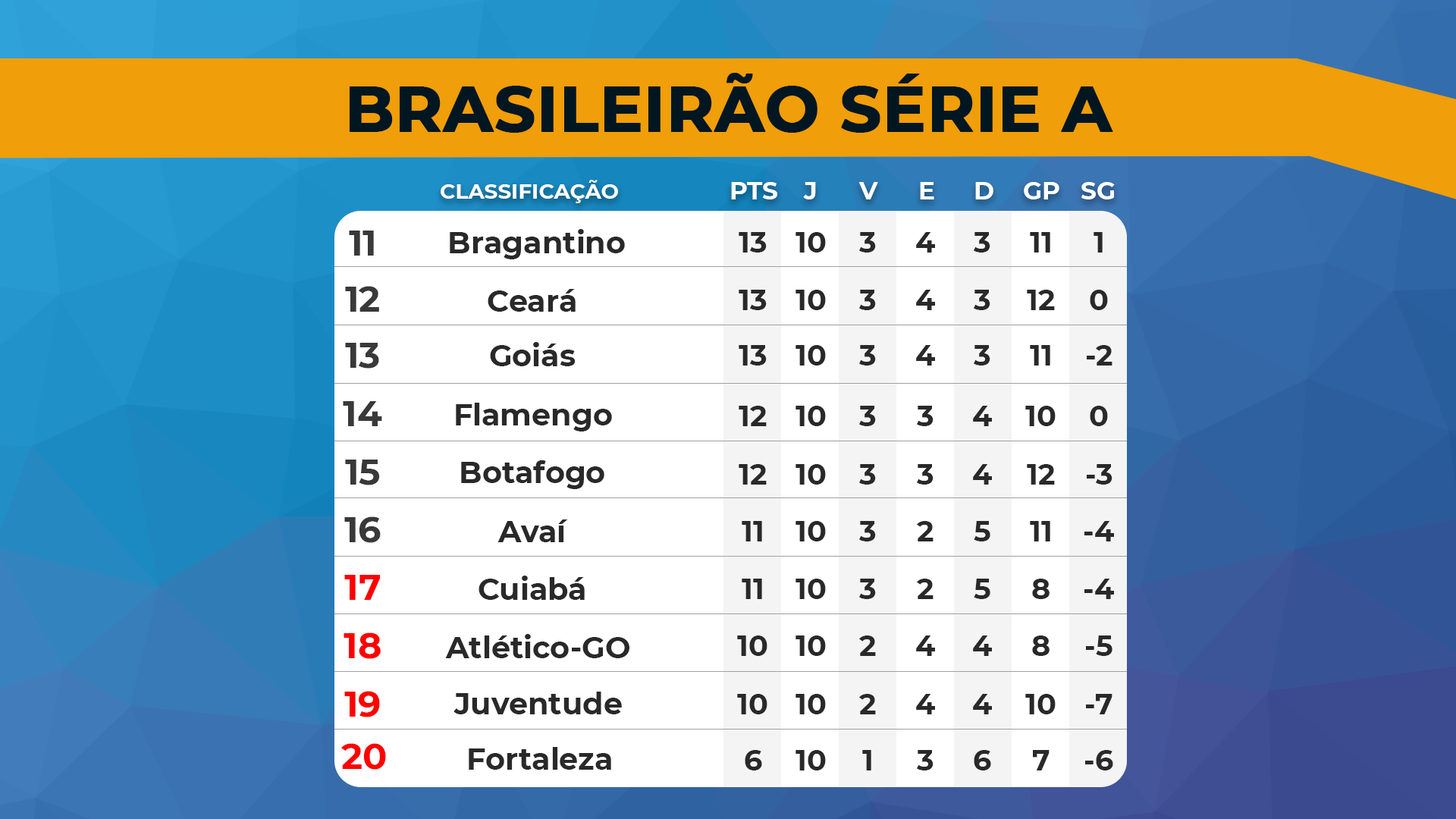
<style>
.page{position:relative;width:1456px;height:819px;background:#ffffff}
.page>*{position:absolute;margin:0}
.t1{font:63.7px "Montserrat-Bold";color:#001621;text-transform:uppercase;font-weight:bold}
.t2{font:21.1px "Montserrat-Bold";color:#ffffff}
.t3{font:24.8px "Montserrat-Bold";color:#ffffff}
.t4{font:36.2px "Montserrat-Bold";color:#393939}
.t5{font:30.1px "Montserrat-Bold";color:#292929}
.t6{font:28.9px "Montserrat-Bold";color:#292929}
.t7{font:36.2px "Montserrat-Bold";color:#ff0000}
</style>
<div class="page">
<p class="t1" style="left:350px;top:73px;width:763px;height:60px">BRASILEIRÃO SÉRIE A</p>
<p class="t2" style="left:441px;top:180px;width:177px;height:23px">CLASSIFICAÇÃO</p>
<p class="t3" style="left:731px;top:182px;width:46px;height:17px">PTS</p>
<p class="t3" style="left:803px;top:182px;width:13px;height:17px">J</p>
<p class="t3" style="left:858px;top:182px;width:20px;height:17px">V</p>
<p class="t3" style="left:920px;top:182px;width:14px;height:17px">E</p>
<p class="t3" style="left:975px;top:182px;width:18px;height:17px">D</p>
<p class="t3" style="left:1024px;top:182px;width:35px;height:17px">GP</p>
<p class="t3" style="left:1081px;top:182px;width:34px;height:17px">SG</p>
<p class="t4" style="left:349px;top:231px;width:25px;height:25px">11</p>
<p class="t5" style="left:450px;top:229px;width:175px;height:30px">Bragantino</p>
<p class="t6" style="left:739px;top:232px;width:28px;height:21px">13</p>
<p class="t6" style="left:795px;top:232px;width:31px;height:21px">10</p>
<p class="t6" style="left:859px;top:232px;width:17px;height:21px">3</p>
<p class="t6" style="left:916px;top:232px;width:19px;height:21px">4</p>
<p class="t6" style="left:974px;top:232px;width:16px;height:21px">3</p>
<p class="t6" style="left:1030px;top:232px;width:20px;height:21px">11</p>
<p class="t6" style="left:1094px;top:232px;width:9px;height:21px">1</p>
<p class="t4" style="left:345px;top:286px;width:34px;height:26px">12</p>
<p class="t5" style="left:488px;top:289px;width:88px;height:23px">Ceará</p>
<p class="t6" style="left:739px;top:290px;width:28px;height:20px">13</p>
<p class="t6" style="left:795px;top:290px;width:31px;height:20px">10</p>
<p class="t6" style="left:859px;top:290px;width:17px;height:20px">3</p>
<p class="t6" style="left:916px;top:290px;width:19px;height:20px">4</p>
<p class="t6" style="left:974px;top:290px;width:16px;height:20px">3</p>
<p class="t6" style="left:1027px;top:290px;width:28px;height:20px">12</p>
<p class="t6" style="left:1090px;top:290px;width:18px;height:20px">0</p>
<p class="t4" style="left:345px;top:343px;width:34px;height:26px">13</p>
<p class="t5" style="left:490px;top:342px;width:86px;height:24px">Goiás</p>
<p class="t6" style="left:739px;top:345px;width:28px;height:21px">13</p>
<p class="t6" style="left:795px;top:345px;width:31px;height:21px">10</p>
<p class="t6" style="left:859px;top:345px;width:17px;height:21px">3</p>
<p class="t6" style="left:916px;top:345px;width:19px;height:21px">4</p>
<p class="t6" style="left:974px;top:345px;width:16px;height:21px">3</p>
<p class="t6" style="left:1030px;top:345px;width:20px;height:21px">11</p>
<p class="t6" style="left:1087px;top:345px;width:25px;height:21px">-2</p>
<p class="t4" style="left:343px;top:401px;width:39px;height:25px">14</p>
<p class="t5" style="left:456px;top:403px;width:156px;height:28px">Flamengo</p>
<p class="t6" style="left:739px;top:406px;width:28px;height:20px">12</p>
<p class="t6" style="left:795px;top:406px;width:31px;height:20px">10</p>
<p class="t6" style="left:859px;top:406px;width:17px;height:20px">3</p>
<p class="t6" style="left:917px;top:406px;width:16px;height:20px">3</p>
<p class="t6" style="left:973px;top:406px;width:19px;height:20px">4</p>
<p class="t6" style="left:1025px;top:406px;width:31px;height:20px">10</p>
<p class="t6" style="left:1090px;top:406px;width:18px;height:20px">0</p>
<p class="t4" style="left:345px;top:460px;width:35px;height:25px">15</p>
<p class="t5" style="left:461px;top:460px;width:143px;height:29px">Botafogo</p>
<p class="t6" style="left:739px;top:464px;width:28px;height:21px">12</p>
<p class="t6" style="left:795px;top:464px;width:31px;height:21px">10</p>
<p class="t6" style="left:859px;top:464px;width:17px;height:21px">3</p>
<p class="t6" style="left:917px;top:464px;width:16px;height:21px">3</p>
<p class="t6" style="left:973px;top:464px;width:19px;height:21px">4</p>
<p class="t6" style="left:1027px;top:464px;width:28px;height:21px">12</p>
<p class="t6" style="left:1087px;top:464px;width:25px;height:21px">-3</p>
<p class="t4" style="left:344px;top:516px;width:37px;height:27px">16</p>
<p class="t5" style="left:497px;top:519px;width:71px;height:23px">Avaí</p>
<p class="t6" style="left:742px;top:521px;width:20px;height:20px">11</p>
<p class="t6" style="left:795px;top:521px;width:31px;height:20px">10</p>
<p class="t6" style="left:859px;top:521px;width:17px;height:20px">3</p>
<p class="t6" style="left:917px;top:521px;width:16px;height:20px">2</p>
<p class="t6" style="left:974px;top:521px;width:16px;height:20px">5</p>
<p class="t6" style="left:1030px;top:521px;width:20px;height:20px">11</p>
<p class="t6" style="left:1084px;top:521px;width:30px;height:20px">-4</p>
<p class="t7" style="left:344px;top:575px;width:36px;height:25px">17</p>
<p class="t5" style="left:479px;top:576px;width:106px;height:24px">Cuiabá</p>
<p class="t6" style="left:742px;top:579px;width:20px;height:20px">11</p>
<p class="t6" style="left:795px;top:579px;width:31px;height:20px">10</p>
<p class="t6" style="left:859px;top:579px;width:17px;height:20px">3</p>
<p class="t6" style="left:917px;top:579px;width:16px;height:20px">2</p>
<p class="t6" style="left:974px;top:579px;width:16px;height:20px">5</p>
<p class="t6" style="left:1032px;top:579px;width:18px;height:20px">8</p>
<p class="t6" style="left:1084px;top:579px;width:30px;height:20px">-4</p>
<p class="t7" style="left:344px;top:632px;width:37px;height:27px">18</p>
<p class="t5" style="left:445px;top:634px;width:184px;height:24px">Atlético-GO</p>
<p class="t6" style="left:737px;top:635px;width:30px;height:21px">10</p>
<p class="t6" style="left:795px;top:635px;width:31px;height:21px">10</p>
<p class="t6" style="left:859px;top:635px;width:17px;height:21px">2</p>
<p class="t6" style="left:916px;top:635px;width:19px;height:21px">4</p>
<p class="t6" style="left:973px;top:635px;width:19px;height:21px">4</p>
<p class="t6" style="left:1032px;top:635px;width:18px;height:21px">8</p>
<p class="t6" style="left:1086px;top:635px;width:26px;height:21px">-5</p>
<p class="t7" style="left:344px;top:691px;width:36px;height:26px">19</p>
<p class="t5" style="left:453px;top:692px;width:169px;height:22px">Juventude</p>
<p class="t6" style="left:737px;top:694px;width:30px;height:20px">10</p>
<p class="t6" style="left:795px;top:694px;width:31px;height:20px">10</p>
<p class="t6" style="left:859px;top:694px;width:17px;height:20px">2</p>
<p class="t6" style="left:916px;top:694px;width:19px;height:20px">4</p>
<p class="t6" style="left:973px;top:694px;width:19px;height:20px">4</p>
<p class="t6" style="left:1025px;top:694px;width:31px;height:20px">10</p>
<p class="t6" style="left:1086px;top:694px;width:26px;height:20px">-7</p>
<p class="t7" style="left:341px;top:743px;width:45px;height:27px">20</p>
<p class="t5" style="left:469px;top:747px;width:142px;height:23px">Fortaleza</p>
<p class="t6" style="left:745px;top:750px;width:17px;height:20px">6</p>
<p class="t6" style="left:795px;top:750px;width:31px;height:20px">10</p>
<p class="t6" style="left:862px;top:750px;width:9px;height:20px">1</p>
<p class="t6" style="left:917px;top:750px;width:16px;height:20px">3</p>
<p class="t6" style="left:974px;top:750px;width:17px;height:20px">6</p>
<p class="t6" style="left:1033px;top:750px;width:17px;height:20px">7</p>
<p class="t6" style="left:1085px;top:750px;width:28px;height:20px">-6</p>
</div>
